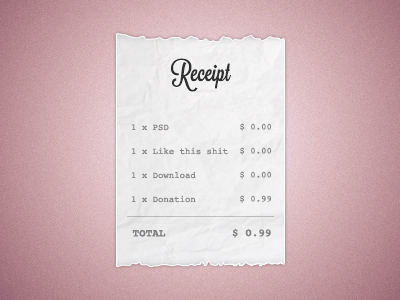
<style>
.page{position:relative;width:400px;height:300px}
.page>*{position:absolute;margin:0}
.t1{font:25px "Lavanderia-Sturdy";color:#313131}
.t2{font:9px/24px "Courier";color:#838383}
.t3{font:9px/24px "Courier";color:#848484}
.t4{font:11px "Courier-Bold";color:#818081}
.t5{font:11px "Courier-Bold";color:#858585}
</style>
<div class="page">
<p class="t1" style="left:170px;top:58px;width:61px;height:34px">Receipt</p>
<p class="t2" style="left:132px;top:124px;width:96px;height:79px;text-align:justify">1 x PSD  <br>1 x Like this shit <br>1 x Download        <br>1 x Donation</p>
<p class="t3" style="left:240px;top:123px;width:32px;height:80px;text-align:justify">$ 0.00<br>$ 0.00<br>$ 0.00<br>$ 0.99</p>
<p class="t4" style="left:132px;top:229px;width:34px;height:8px">TOTAL</p>
<p class="t5" style="left:232px;top:228px;width:39px;height:10px">$ 0.99</p>
</div>
